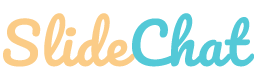
<style>
.page{position:relative;width:256px;height:80px;background:#ffffff}
.page>*{position:absolute;margin:0}
.t1{font:56px "Pacifico-Regular";letter-spacing:0.02em;color:#fbcc87}
.t2{font:56px "Pacifico-Regular";letter-spacing:0.02em;color:#53c9d7}
</style>
<div class="page">
<p class="t1" style="left:3px;top:13px;width:251px;height:54px">Slide<span class="t2">Chat</span></p>
</div>
